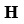
<style>
.page{position:relative;width:24px;height:24px;background:#ffffff}
.page>*{position:absolute;margin:0}
.t1{font:18px "TimesNewRomanPS-BoldMT";color:#000000}
</style>
<div class="page">
<p class="t1" style="left:4px;top:6px;width:14px;height:12px">H</p>
</div>
